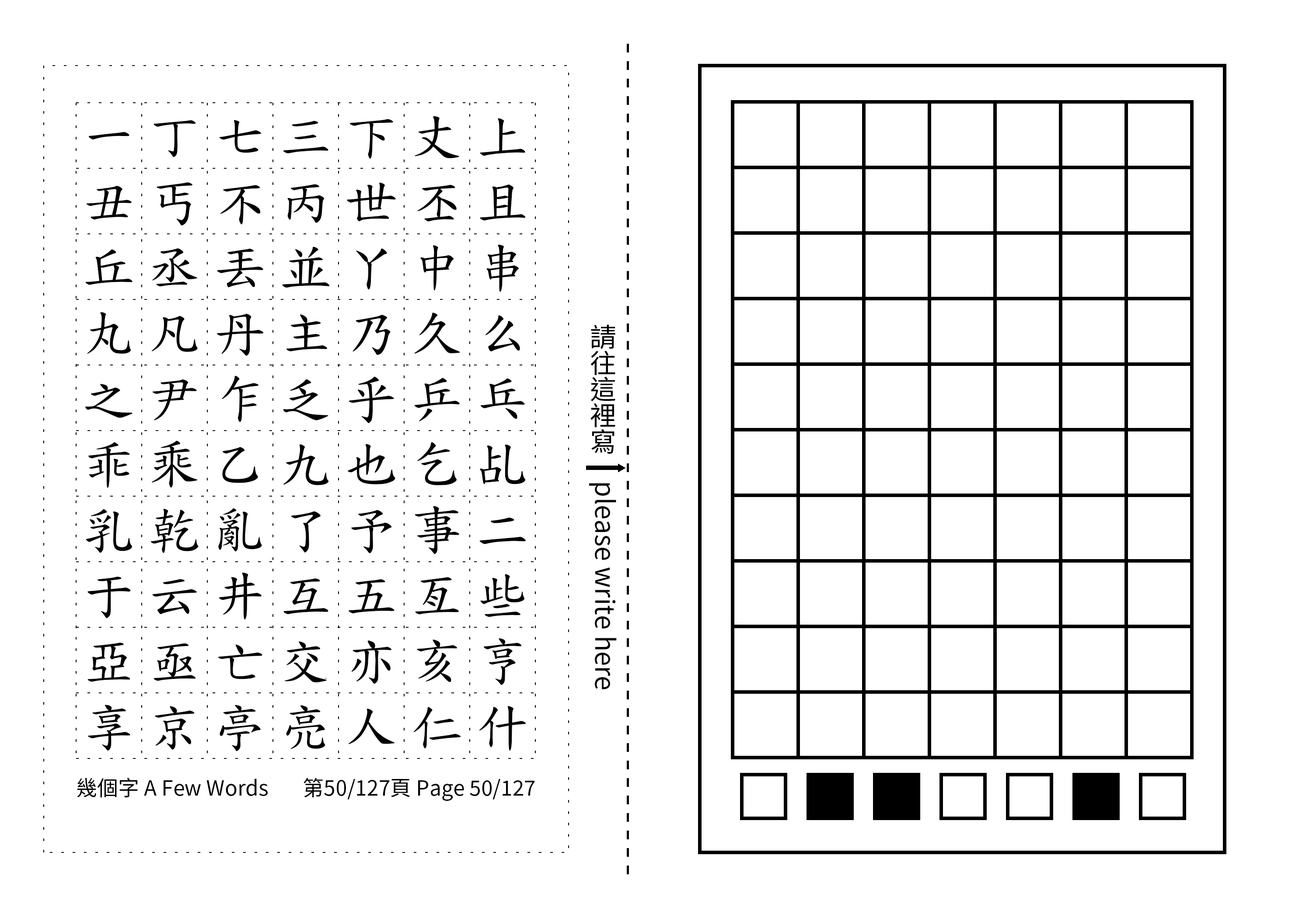
<style>
.page{position:relative;width:1299px;height:918px;background:#ffffff}
.page>*{position:absolute;margin:0}
.t1{font:52.5px/65.6px "TW-Kai-98_1";letter-spacing:0.25em;color:#000000}
.t2{font:26.2px "SourceHanSansTC-Regular";color:#000000}
.t3{font:21px "SourceHanSansTC-Regular";color:#000000}
</style>
<div class="page">
<p class="t1" style="left:85px;top:116px;width:441px;height:636px;text-align:center">一丁七三下丈上丑丐不丙世丕且丘丞丟並丫中串丸凡丹主乃久么之尹乍乏乎乒乓乖乘乙九也乞乩乳乾亂了予事二于云井互五亙些亞亟亡交亦亥亨享京亭亮人仁什</p>
<p class="t2" style="left:589px;top:324px;width:28px;height:366px;text-align:center">請往這裡寫　please write here</p>
<p class="t3" style="left:77px;top:778px;width:191px;height:20px">幾個字 A Few Words</p>
<p class="t3" style="left:303px;top:778px;width:232px;height:23px">第50/127頁 Page 50/127</p>
</div>
